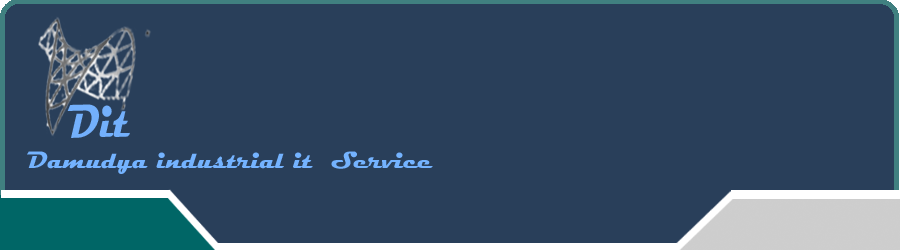
<style>
.page{position:relative;width:900px;height:250px;background:#293f5a}
.page>*{position:absolute;margin:0}
.t1{font:48px "Magneto-Bold";color:#73b0fc;scale:0.77 1}
.t2{font:48px "LucidaHandwriting-Italic";color:#e42925;scale:0.77 1}
.t3{font:24px "Magneto-Bold";color:#74b3ff}
</style>
<div class="page">
<p class="t1" style="left:67px;top:104px;width:63px;height:34px;rotate:-1deg"><span class="t2"> </span>Dit<br><br><br><span class="t2"><br><br><br><br>mm</span></p>
<p class="t3" style="left:27px;top:151px;width:406px;height:23px">Damudya industrial it  Service</p>
</div>
